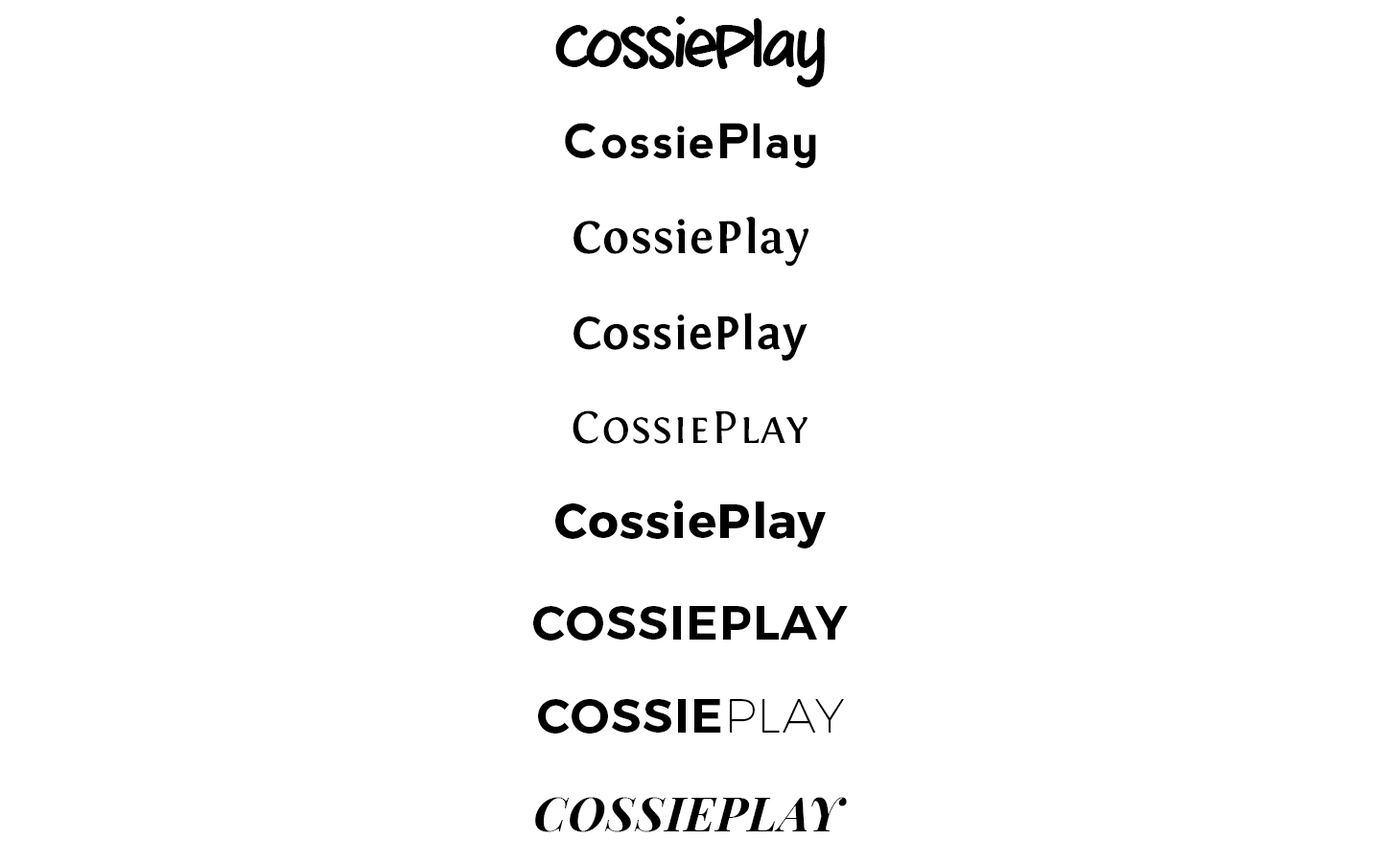
<style>
.page{position:relative;width:1381px;height:863px;background:#ffffff}
.page>*{position:absolute;margin:0}
.t1{font:48px "mixtapeMike_TRIAL";letter-spacing:0.025em;color:#000000}
.t2{font:48px "nevis-Bold";letter-spacing:0.025em;color:#000000}
.t3{font:48px "Fontin-Bold";letter-spacing:0.025em;color:#000000}
.t4{font:48px "FontinSans-Bold";letter-spacing:0.025em;color:#000000}
.t5{font:48px "Fontin-SmallCaps";letter-spacing:0.025em;color:#000000}
.t6{font:48px "Montserrat-Bold";letter-spacing:0.025em;color:#000000}
.t7{font:48px "Montserrat-SemiBold";letter-spacing:0.025em;color:#000000}
.t8{font:48px "Montserrat-UltraLight";letter-spacing:0.025em;color:#000000}
.t9{font:48px "PlayfairDisplaySC-BoldItalic";letter-spacing:0.025em;color:#000000}
</style>
<div class="page">
<p class="t1" style="left:555px;top:16px;width:270px;height:71px">CossiePlay</p>
<p class="t2" style="left:565px;top:123px;width:251px;height:46px">CossiePlay</p>
<p class="t3" style="left:574px;top:217px;width:235px;height:50px">CossiePlay</p>
<p class="t4" style="left:574px;top:313px;width:234px;height:49px">CossiePlay</p>
<p class="t5" style="left:573px;top:411px;width:236px;height:33px">CossiePlay</p>
<p class="t6" style="left:555px;top:500px;width:271px;height:49px">CossiePlay</p>
<p class="t7" style="left:533px;top:606px;width:315px;height:35px">COSSIEPLAY</p>
<p class="t7" style="left:538px;top:699px;width:306px;height:35px">COSSIE<span class="t8">PLAY</span></p>
<p class="t9" style="left:535px;top:797px;width:312px;height:36px">COSSIEPLAY</p>
</div>
